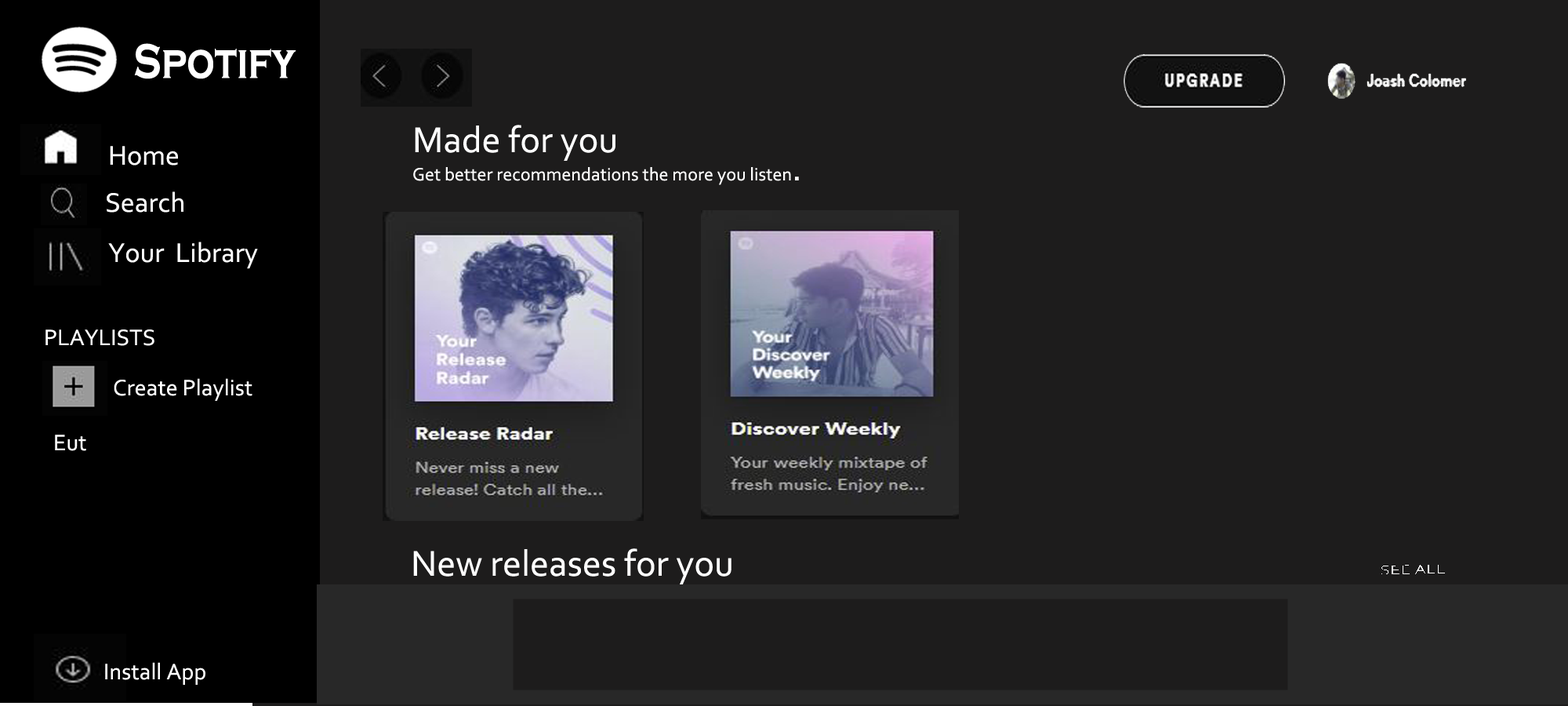
<style>
.page{position:relative;width:1568px;height:706px;background:#1d1c1c}
.page>*{position:absolute;margin:0}
.t1{font:50.6px "CopperplateGothic-Bold";color:#ffffff;scale:0.77 1}
.t2{font:37.6px "Corbel";color:#ffffff}
.t3{font:28.2px "Corbel";color:#ffffff}
.t4{font:18.8px "Corbel";color:#ffffff}
.t5{font:23.5px "Corbel";color:#ffffff}
</style>
<div class="page">
<p class="t1" style="left:134px;top:43px;width:162px;height:36px">Spotify</p>
<p class="t2" style="left:415px;top:125px;width:200px;height:36px">Made for you</p>
<p class="t3" style="left:110px;top:146px;width:68px;height:19px">Home</p>
<p class="t4" style="left:413px;top:167px;width:386px;height:18px">Get better recommendations the more you listen<span class="t2">.</span></p>
<p class="t3" style="left:107px;top:191px;width:76px;height:21px">Search</p>
<p class="t3" style="left:108px;top:241px;width:150px;height:28px">Your  Library</p>
<p class="t5" style="left:45px;top:329px;width:109px;height:17px">PLAYLISTS</p>
<p class="t5" style="left:114px;top:378px;width:138px;height:23px">Create Playlist</p>
<p class="t5" style="left:55px;top:434px;width:31px;height:17px">Eut</p>
<p class="t2" style="left:413px;top:548px;width:318px;height:36px">New releases for you</p>
<p class="t5" style="left:105px;top:662px;width:100px;height:22px">Install App</p>
</div>
